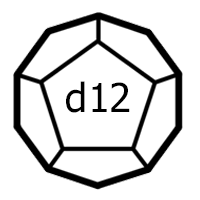
<style>
.page{position:relative;width:200px;height:200px;background:#ffffff}
.page>*{position:absolute;margin:0}
.t1{font:40px "Tahoma";color:#000000}
</style>
<div class="page">
<p class="t1" style="left:66px;top:81px;width:64px;height:32px">d12</p>
</div>
